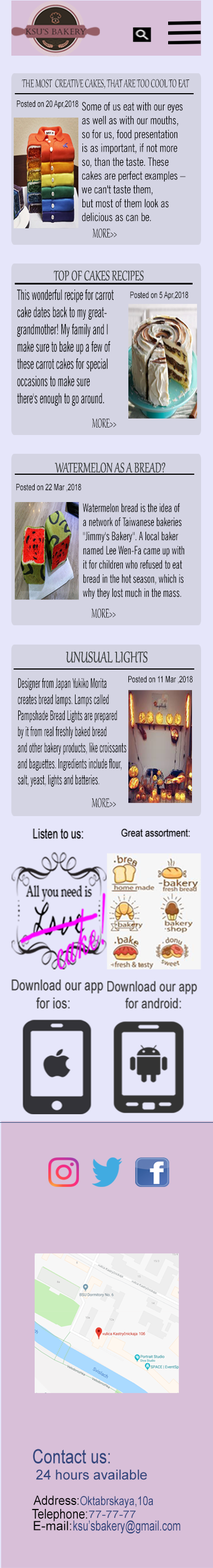
<style>
.page{position:relative;width:213px;height:1568px}
.page>*{position:absolute;margin:0}
.t1{font:13.8px "Gabriola";color:#070808;scale:0.62 1}
.t2{font:8.7px "ArialMT";color:#070808;scale:0.7 1}
.t3{font:8.7px "Gabriola";color:#070808;scale:0.7 1}
.t4{font:11.5px "NewsGothicBT-RomanCondensed";color:#050505;scale:0.93 1}
.t5{font:15.8px "Gabriola";color:#070808;scale:0.55 1}
.t6{font:16.9px "Gabriola";color:#373b3a;scale:0.68 1}
.t7{font:14.4px "NewsGothicBT-RomanCondensed";color:#070808;scale:0.65 1}
.t8{font:11.8px "NewsGothicBT-RomanCondensed";color:#070808;scale:0.79 1}
.t9{font:18.8px "Gabriola";color:#373b3a;scale:0.72 1}
.t10{font:13.4px "NewsGothicBT-RomanCondensed";color:#070808;scale:0.59 1}
.t11{font:19.5px "ArialMT";color:#33467d;scale:0.8 1}
.t12{font:13.7px "ArialMT";color:#33467d}
.t13{font:13px "ArialMT";color:#050505;scale:0.91 1}
.t14{font:12.3px "ArialMT";color:#33467d;scale:0.79 1}
.t15{font:13.4px "ArialMT";color:#050505;scale:0.86 1}
.t16{font:10.3px "ArialMT";color:#33467d;scale:1.16 1}
.t17{font:12.8px "ArialMT";color:#050505}
.t18{font:13.9px "ArialMT";color:#33467d;scale:0.72 1}
</style>
<div class="page">
<p class="t1" style="left:22px;top:79px;width:168px;height:10px">THE MOST  CREATIVE CAKES, THAT ARE TOO COOL TO EAT</p>
<p class="t2" style="left:16px;top:101px;width:62px;height:8px"><span class="t3"><br></span>Posted on 20 Apr,2018</p>
<p class="t4" style="left:82px;top:102px;width:104px;height:119px">Some of us eat with our eyes <br>as well as with our mouths,<br>so for us, food presentation <br>is as important, if not more <br>so, than the taste. These <br>cakes are perfect examples – <br>we can't taste them,<br>but most of them look as <br>delicious as can be.</p>
<p class="t5" style="left:93px;top:228px;width:24px;height:10px">MORE&gt;&gt;</p>
<p class="t6" style="left:53px;top:270px;width:91px;height:11px">TOP OF CAKES RECIPES</p>
<p class="t7" style="left:17px;top:289px;width:97px;height:117px">This wonderful recipe for carrot <br>cake dates back to my great-<br>grandmother! My family and I <br>make sure to bake up a few of <br>these carrot cakes for special <br>occasions to make sure <br>there's enough to go around.</p>
<p class="t2" style="left:130px;top:291px;width:59px;height:9px"><span class="t3"><br></span>Posted on 5 Apr,2018</p>
<p class="t5" style="left:92px;top:418px;width:24px;height:10px">MORE&gt;&gt;</p>
<p class="t6" style="left:55px;top:462px;width:110px;height:11px">WATERMELON AS A BREAD?</p>
<p class="t2" style="left:16px;top:484px;width:65px;height:8px"><span class="t3"><br></span>Posted on 22 Mar ,2018</p>
<p class="t8" style="left:83px;top:503px;width:102px;height:96px">Watermelon bread is the idea of <br>​​a network of Taiwanese bakeries <br>"Jimmy's Bakery". A local baker <br>named Lee Wen-Fa came up with <br>it for children who refused to eat <br>bread in the hot season, which is <br>why they lost much in the mass.</p>
<p class="t5" style="left:91px;top:608px;width:25px;height:10px">MORE&gt;&gt;</p>
<p class="t9" style="left:66px;top:651px;width:82px;height:12px">UNUSUAL LIGHTS</p>
<p class="t2" style="left:128px;top:676px;width:65px;height:8px"><span class="t3"><br></span>Posted on 11 Mar ,2018</p>
<p class="t10" style="left:18px;top:678px;width:109px;height:109px">Designer from Japan Yukiko Morita <br>creates bread lamps. Lamps called<br>Pampshade Bread Lights are prepared<br>by it from real freshly baked bread <br>and other bakery products, like croissants<br>and baguettes. Ingredients include flour, <br>salt, yeast, lights and batteries.</p>
<p class="t5" style="left:91px;top:798px;width:25px;height:10px">MORE&gt;&gt;</p>
<p class="t11" style="left:33px;top:1449px;width:77px;height:15px">Contact us:</p>
<p class="t12" style="left:36px;top:1469px;width:111px;height:11px">24 hours available</p>
<p class="t13" style="left:34px;top:1495px;width:45px;height:10px">Address:</p>
<p class="t14" style="left:80px;top:1496px;width:73px;height:12px">Oktabrskaya,10a</p>
<p class="t15" style="left:32px;top:1509px;width:55px;height:12px">Telephone:</p>
<p class="t16" style="left:89px;top:1511px;width:47px;height:7px">77-77-77</p>
<p class="t17" style="left:34px;top:1521px;width:38px;height:10px">E-mail:</p>
<p class="t18" style="left:73px;top:1520px;width:108px;height:14px">ksu’sbakery@gmail.com</p>
</div>
